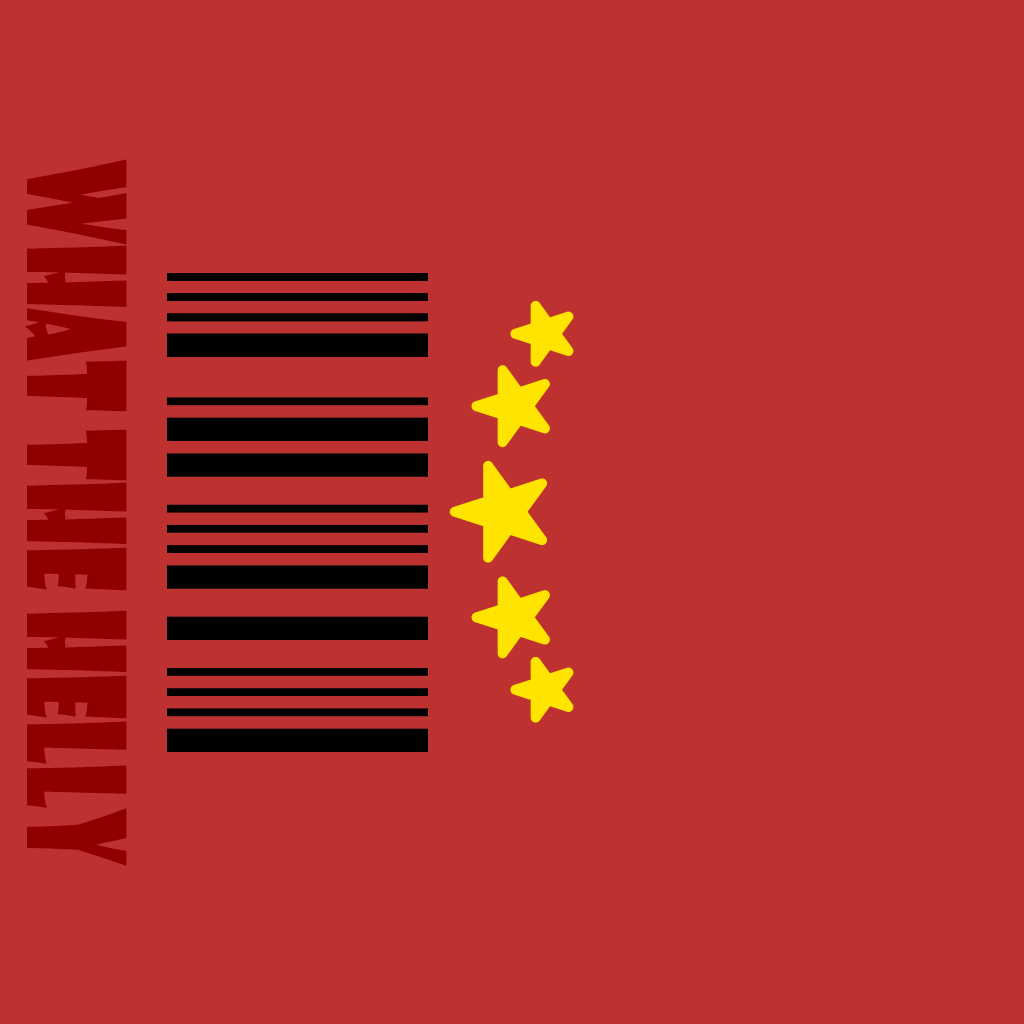
<style>
.page{position:relative;width:1024px;height:1024px;background:#bd3131}
.page>*{position:absolute;margin:0}
.t1{font:132.5px "ShowcardGothic-Reg";color:#900000;scale:0.63 1}
</style>
<div class="page">
<p class="t1" style="left:25px;top:159px;width:102px;height:707px;rotate:90deg">WHAT THE HELLY</p>
</div>
